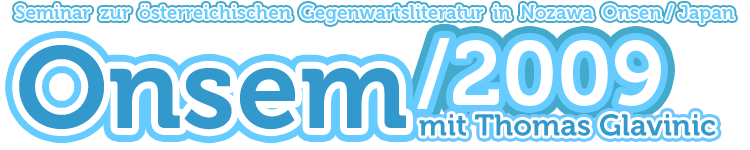
<style>
.page{position:relative;width:750px;height:150px;background:#ffffff}
.page>*{position:absolute;margin:0}
.t1{font:19px "Museo-700";color:#66ccff}
.t2{font:90px "Museo-700";color:#ffffff}
.t3{font:115px "Museo-700";color:#3399cc}
.t4{font:30px "Museo-700";color:#3399cc}
.t5{font:15px "Museo-700";color:#3399cc}
.t6{font:15px "Museo-700";color:#660000}
</style>
<div class="page">
<p class="t1" style="left:15px;top:5px;width:719px;height:18px">Seminar zur österreichischen Gegenwartsliteratur in Nozawa Onsen / Japan</p>
<p class="t1" style="left:15px;top:5px;width:719px;height:18px">Seminar zur österreichischen Gegenwartsliteratur in Nozawa Onsen / Japan</p>
<p class="t2" style="left:417px;top:38px;width:244px;height:71px">/2009</p>
<p class="t2" style="left:417px;top:38px;width:244px;height:71px">/2009</p>
<p class="t3" style="left:19px;top:45px;width:387px;height:85px">Onsem</p>
<p class="t3" style="left:19px;top:45px;width:387px;height:85px">Onsem</p>
<p class="t4" style="left:419px;top:114px;width:297px;height:22px"><span class="t5"><br></span>mit Thomas Glavinic</p>
<p class="t4" style="left:419px;top:114px;width:297px;height:22px"><span class="t5"><br></span>mit Thomas Glavinic</p>
<p class="t4" style="left:419px;top:114px;width:297px;height:22px"><span class="t5"><br></span>mit Thomas Glavinic</p>
<p class="t4" style="left:419px;top:114px;width:297px;height:22px"><span class="t6"><br></span>mit Thomas Glavinic</p>
</div>
